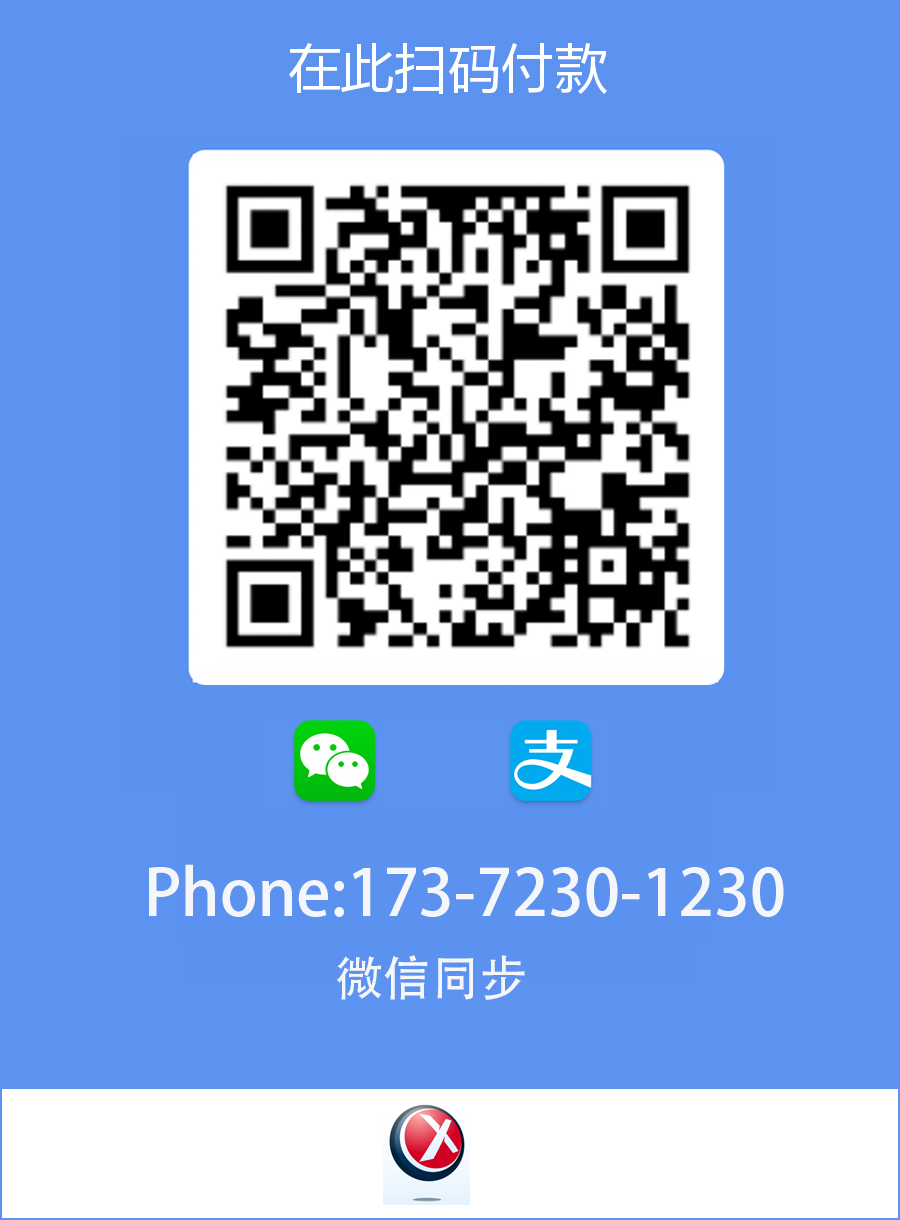
<style>
.page{position:relative;width:900px;height:1220px;background:#5c93f0}
.page>*{position:absolute;margin:0}
.t1{font:64px "AdobeFanHeitiStd-Bold";color:#f4f6fa}
.t2{font:48px "AdobeHeitiStd-Regular";color:#f4f6fa}
</style>
<div class="page">
<p class="t1" style="left:149px;top:864px;width:635px;height:53px">Phone:173-7230-1230</p>
<p class="t2" style="left:336px;top:955px;width:189px;height:45px">微信同步</p>
</div>
